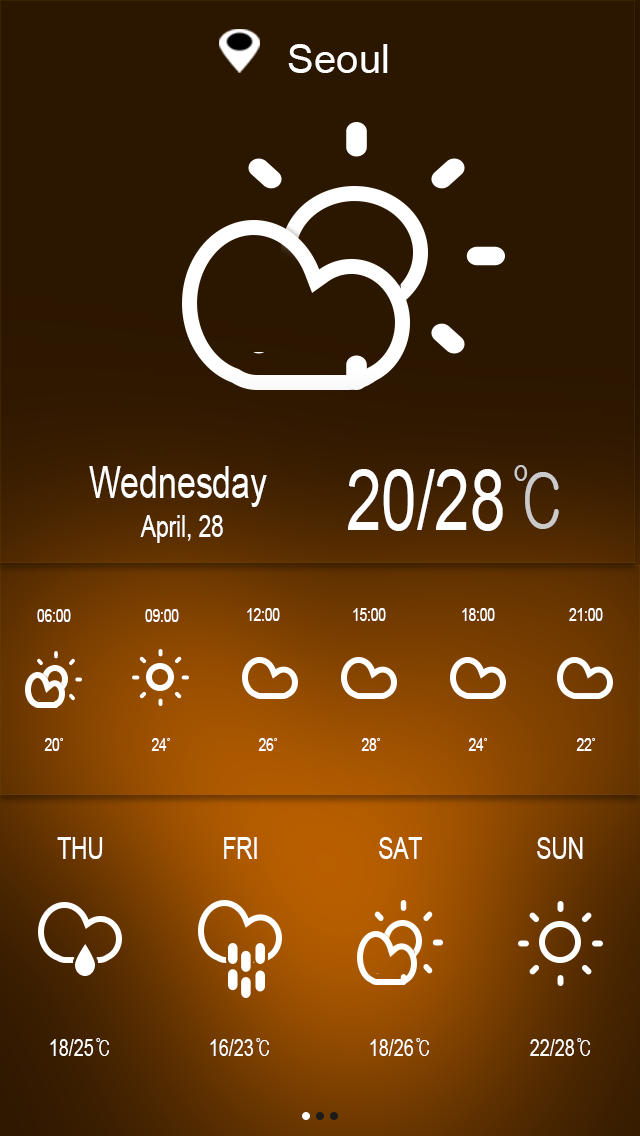
<style>
.page{position:relative;width:640px;height:1136px;background:#2b1600}
.page>*{position:absolute;margin:0}
.t1{font:40px "ArialMT";color:#ffffff}
.t2{font:45px "ArialMT";color:#ffffff;scale:0.75 1}
.t3{font:85px "ArialMT";color:#ffffff;scale:0.75 1}
.t4{font:85px "Gulim";color:#cacaca;scale:0.75 1}
.t5{font:30px "ArialMT";color:#ffffff;scale:0.75 1}
.t6{font:18px "ArialMT";color:#ffffff;scale:0.75 1}
.t7{font:18px "Gulim";color:#ffffff;scale:0.75 1}
.t8{font:24px "ArialMT";color:#ffffff;scale:0.75 1}
.t9{font:24px "Gulim";color:#ffffff;scale:0.75 1}
</style>
<div class="page">
<p class="t1" style="left:288px;top:44px;width:100px;height:29px">Seoul</p>
<p class="t2" style="left:89px;top:466px;width:178px;height:41px">Wednesday</p>
<p class="t3" style="left:348px;top:465px;width:211px;height:66px">20/28<span class="t4">℃</span></p>
<p class="t5" style="left:140px;top:515px;width:83px;height:28px">April, 28</p>
<p class="t6" style="left:37px;top:609px;width:34px;height:13px">06:00</p>
<p class="t6" style="left:145px;top:609px;width:34px;height:13px">09:00</p>
<p class="t6" style="left:247px;top:608px;width:33px;height:13px">12:00</p>
<p class="t6" style="left:353px;top:608px;width:33px;height:13px">15:00</p>
<p class="t6" style="left:462px;top:608px;width:33px;height:13px">18:00</p>
<p class="t6" style="left:569px;top:608px;width:34px;height:13px">21:00</p>
<p class="t6" style="left:44px;top:738px;width:19px;height:13px">20<span class="t7">˚</span></p>
<p class="t6" style="left:151px;top:738px;width:19px;height:13px">24<span class="t7">˚</span></p>
<p class="t6" style="left:258px;top:738px;width:19px;height:13px">26<span class="t7">˚</span></p>
<p class="t6" style="left:361px;top:738px;width:19px;height:13px">28<span class="t7">˚</span></p>
<p class="t6" style="left:468px;top:738px;width:19px;height:13px">24<span class="t7">˚</span></p>
<p class="t6" style="left:576px;top:738px;width:19px;height:13px">22<span class="t7">˚</span></p>
<p class="t5" style="left:57px;top:837px;width:46px;height:22px">THU</p>
<p class="t5" style="left:224px;top:837px;width:33px;height:22px">FRI</p>
<p class="t5" style="left:379px;top:837px;width:43px;height:22px">SAT</p>
<p class="t5" style="left:537px;top:837px;width:46px;height:22px">SUN</p>
<p class="t8" style="left:50px;top:1038px;width:59px;height:18px">18/25<span class="t9">℃</span></p>
<p class="t8" style="left:210px;top:1038px;width:59px;height:18px">16/23<span class="t9">℃</span></p>
<p class="t8" style="left:370px;top:1038px;width:59px;height:18px">18/26<span class="t9">℃</span></p>
<p class="t8" style="left:530px;top:1038px;width:60px;height:18px">22/28<span class="t9">℃</span></p>
</div>
